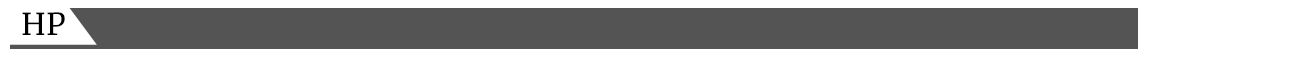
<style>
.page{position:relative;width:1300px;height:77px;background:#ffffff}
.page>*{position:absolute;margin:0}
.t1{font:30px "Merriweather-Regular";color:#000000}
</style>
<div class="page">
<p class="t1" style="left:22px;top:12px;width:43px;height:23px">HP</p>
</div>
